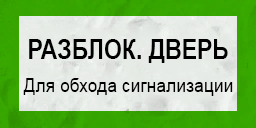
<style>
.page{position:relative;width:256px;height:128px}
.page>*{position:absolute;margin:0}
.t1{font:28.2px "Arial-BoldMT";color:#000000;scale:0.81 1}
.t2{font:18.8px "ArialMT";color:#000000;scale:0.93 1}
</style>
<div class="page">
<p class="t1" style="left:29px;top:39px;width:199px;height:24px">РАЗБЛОК. ДВЕРЬ</p>
<p class="t2" style="left:23px;top:78px;width:210px;height:18px">Для обхода сигнализации</p>
</div>
